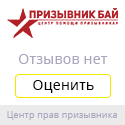
<style>
.page{position:relative;width:125px;height:125px;background:#ffffff}
.page>*{position:absolute;margin:0}
.t1{font:14px "OpenSans-Regular";letter-spacing:0.02em;color:#a8a6bf}
.t2{font:14px "OpenSans-Regular";letter-spacing:0.02em;color:#000000}
.t3{font:9px "OpenSans-Regular";letter-spacing:0.02em;color:#a8a6bf}
</style>
<div class="page">
<p class="t1" style="left:19px;top:54px;width:89px;height:10px">Отзывов нет</p>
<p class="t2" style="left:33px;top:80px;width:61px;height:13px">Оценить</p>
<p class="t3" style="left:7px;top:111px;width:110px;height:9px">Центр прав призывника</p>
</div>
